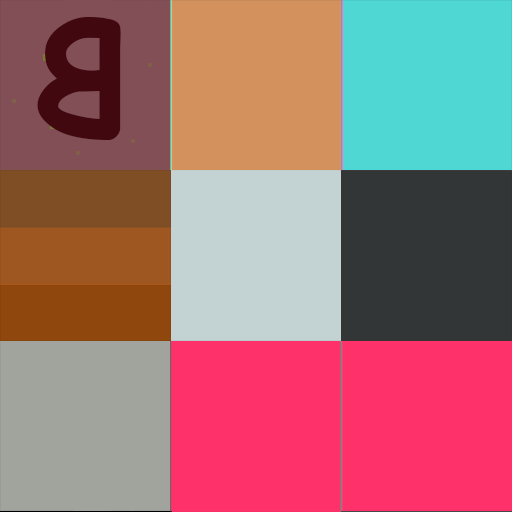
<style>
.page{position:relative;width:512px;height:512px;background:#ff316a}
.page>*{position:absolute;margin:0}
.t1{font:154.8px "ComicSansMS-Bold";color:#410810}
</style>
<div class="page">
<p class="t1" style="left:37px;top:17px;width:84px;height:123px;rotate:180deg">B</p>
</div>
